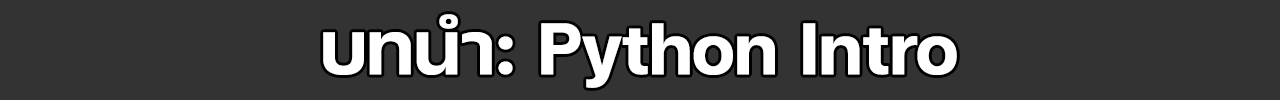
<style>
.page{position:relative;width:1280px;height:100px;background:#333333}
.page>*{position:absolute;margin:0}
.t1{font:100px "FCMinimalBold";color:#ffffff}
</style>
<div class="page">
<p class="t1" style="left:323px;top:14px;width:634px;height:74px">บทนำ: Python Intro</p>
</div>
